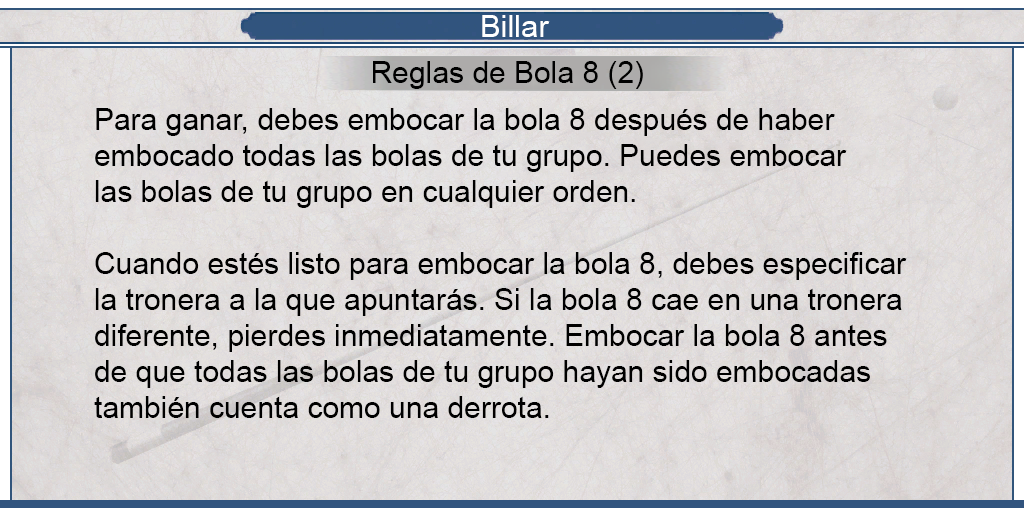
<style>
.page{position:relative;width:1024px;height:512px}
.page>*{position:absolute;margin:0}
.t1{font:30.8px "ArialMT";color:#ffffff}
.t2{font:30px "ArialMT";color:#000000}
</style>
<div class="page">
<p class="t1" style="left:482px;top:15px;width:68px;height:22px">Billar</p>
<p class="t2" style="left:373px;top:61px;width:270px;height:28px">Reglas de Bola 8 (2)</p>
<p class="t2" style="left:94px;top:108px;width:813px;height:310px;text-align:justify">Para ganar, debes embocar la bola 8 después de haber<br>embocado todas las bolas de tu grupo. Puedes embocar<br>las bolas de tu grupo en cualquier orden.<br><br>Cuando estés listo para embocar la bola 8, debes especificar<br>la tronera a la que apuntarás. Si la bola 8 cae en una tronera<br>diferente, pierdes inmediatamente. Embocar la bola 8 antes<br>de que todas las bolas de tu grupo hayan sido embocadas<br>también cuenta como una derrota.</p>
</div>
